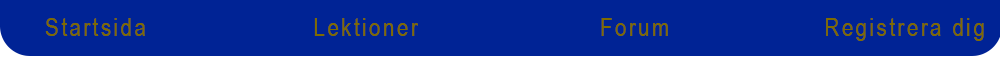
<style>
.page{position:relative;width:1000px;height:57px;background:#002395}
.page>*{position:absolute;margin:0}
.t1{font:25px "ArialNarrow";letter-spacing:0.1em;color:#7f6b00}
</style>
<div class="page">
<p class="t1" style="left:45px;top:18px;width:100px;height:18px">Startsida</p>
<p class="t1" style="left:314px;top:18px;width:104px;height:18px">Lektioner</p>
<p class="t1" style="left:601px;top:18px;width:67px;height:18px">Forum</p>
<p class="t1" style="left:826px;top:18px;width:158px;height:23px">Registrera dig</p>
</div>
